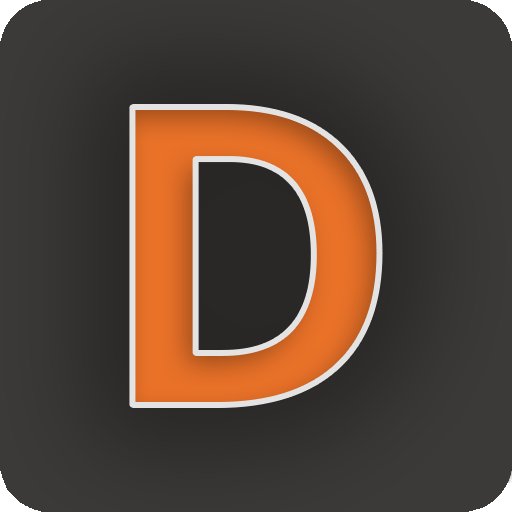
<style>
.page{position:relative;width:512px;height:512px}
.page>*{position:absolute;margin:0}
.t1{font:416.7px "OpenSans-Bold";letter-spacing:0.06em;color:#e36e27}
</style>
<div class="page">
<p class="t1" style="left:132px;top:107px;width:248px;height:298px">D</p>
</div>
